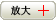
<style>
.page{position:relative;width:56px;height:20px}
.page>*{position:absolute;margin:0}
.t1{font:10px "SimSun";color:#000000}
</style>
<div class="page">
<p class="t1" style="left:11px;top:5px;width:20px;height:11px">放大</p>
</div>
